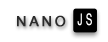
<style>
.page{position:relative;width:108px;height:42px;background:#ffffff}
.page>*{position:absolute;margin:0}
.t1{font:14px "HelveticaNeueLTPro-Roman";letter-spacing:0.2em;color:#2b2b2b;text-transform:uppercase;font-weight:bold}
</style>
<div class="page">
<p class="t1" style="left:17px;top:15px;width:49px;height:12px">NANO</p>
</div>
